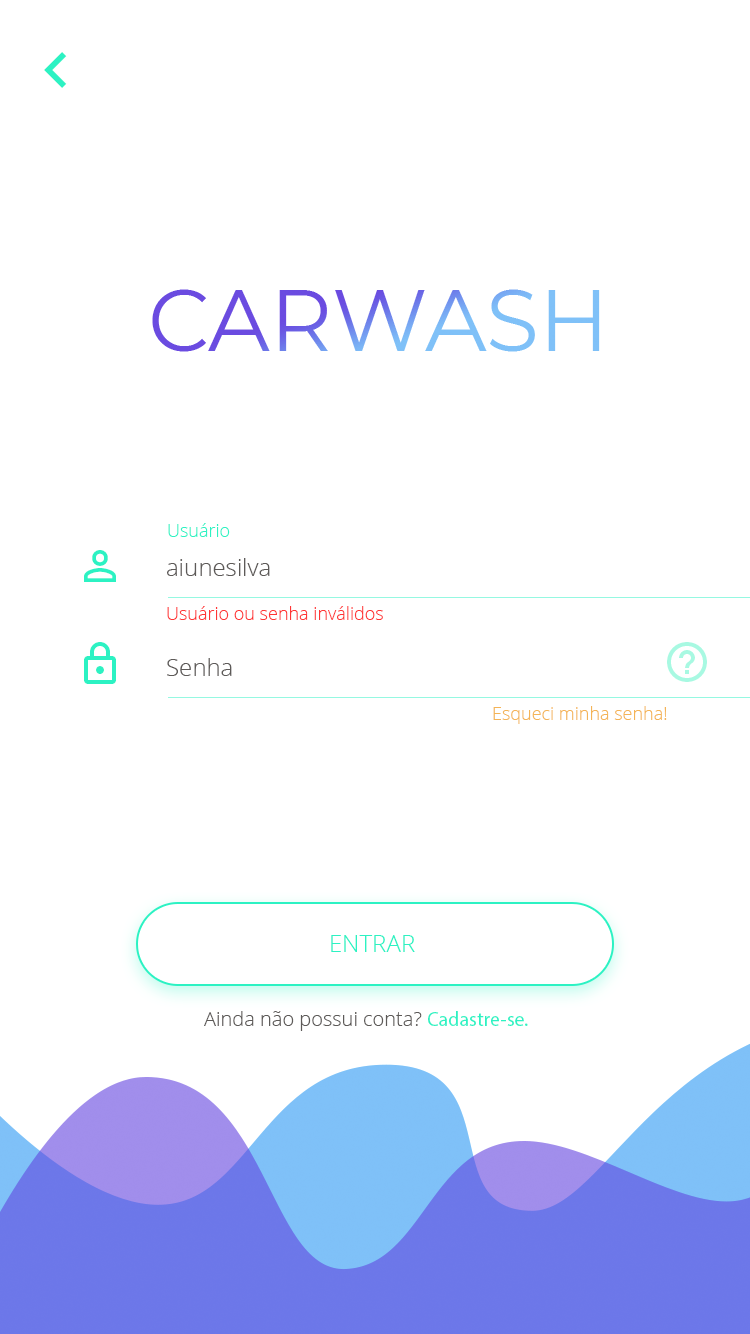
<style>
.page{position:relative;width:750px;height:1334px;background:#ffffff}
.page>*{position:absolute;margin:0}
.t1{font:18px "OpenSans-Light";color:#2cf2c3}
.t2{font:24px "OpenSans-Light";color:#5d5a58}
.t3{font:18px "OpenSans-Light";color:#ff3535}
.t4{font:18px "OpenSans-Light";color:#f4b457}
.t5{font:24px "OpenSans-Light";color:#2cf2c3}
.t6{font:20px "OpenSans-Light";color:#5d5a58}
.t7{font:20px "MyriadPro-Regular";color:#2cf2c3}
</style>
<div class="page">
<p class="t1" style="left:168px;top:523px;width:62px;height:14px">Usuário</p>
<p class="t2" style="left:167px;top:558px;width:103px;height:18px">aiunesilva</p>
<p class="t3" style="left:167px;top:606px;width:216px;height:14px">Usuário ou senha inválidos</p>
<p class="t2" style="left:167px;top:658px;width:65px;height:18px">Senha</p>
<p class="t4" style="left:493px;top:706px;width:174px;height:18px">Esqueci minha senha!</p>
<p class="t5" style="left:331px;top:935px;width:84px;height:17px">ENTRAR</p>
<p class="t6" style="left:204px;top:1011px;width:324px;height:20px">Ainda não possui conta? <span class="t7">Cadastre-se.</span></p>
</div>
